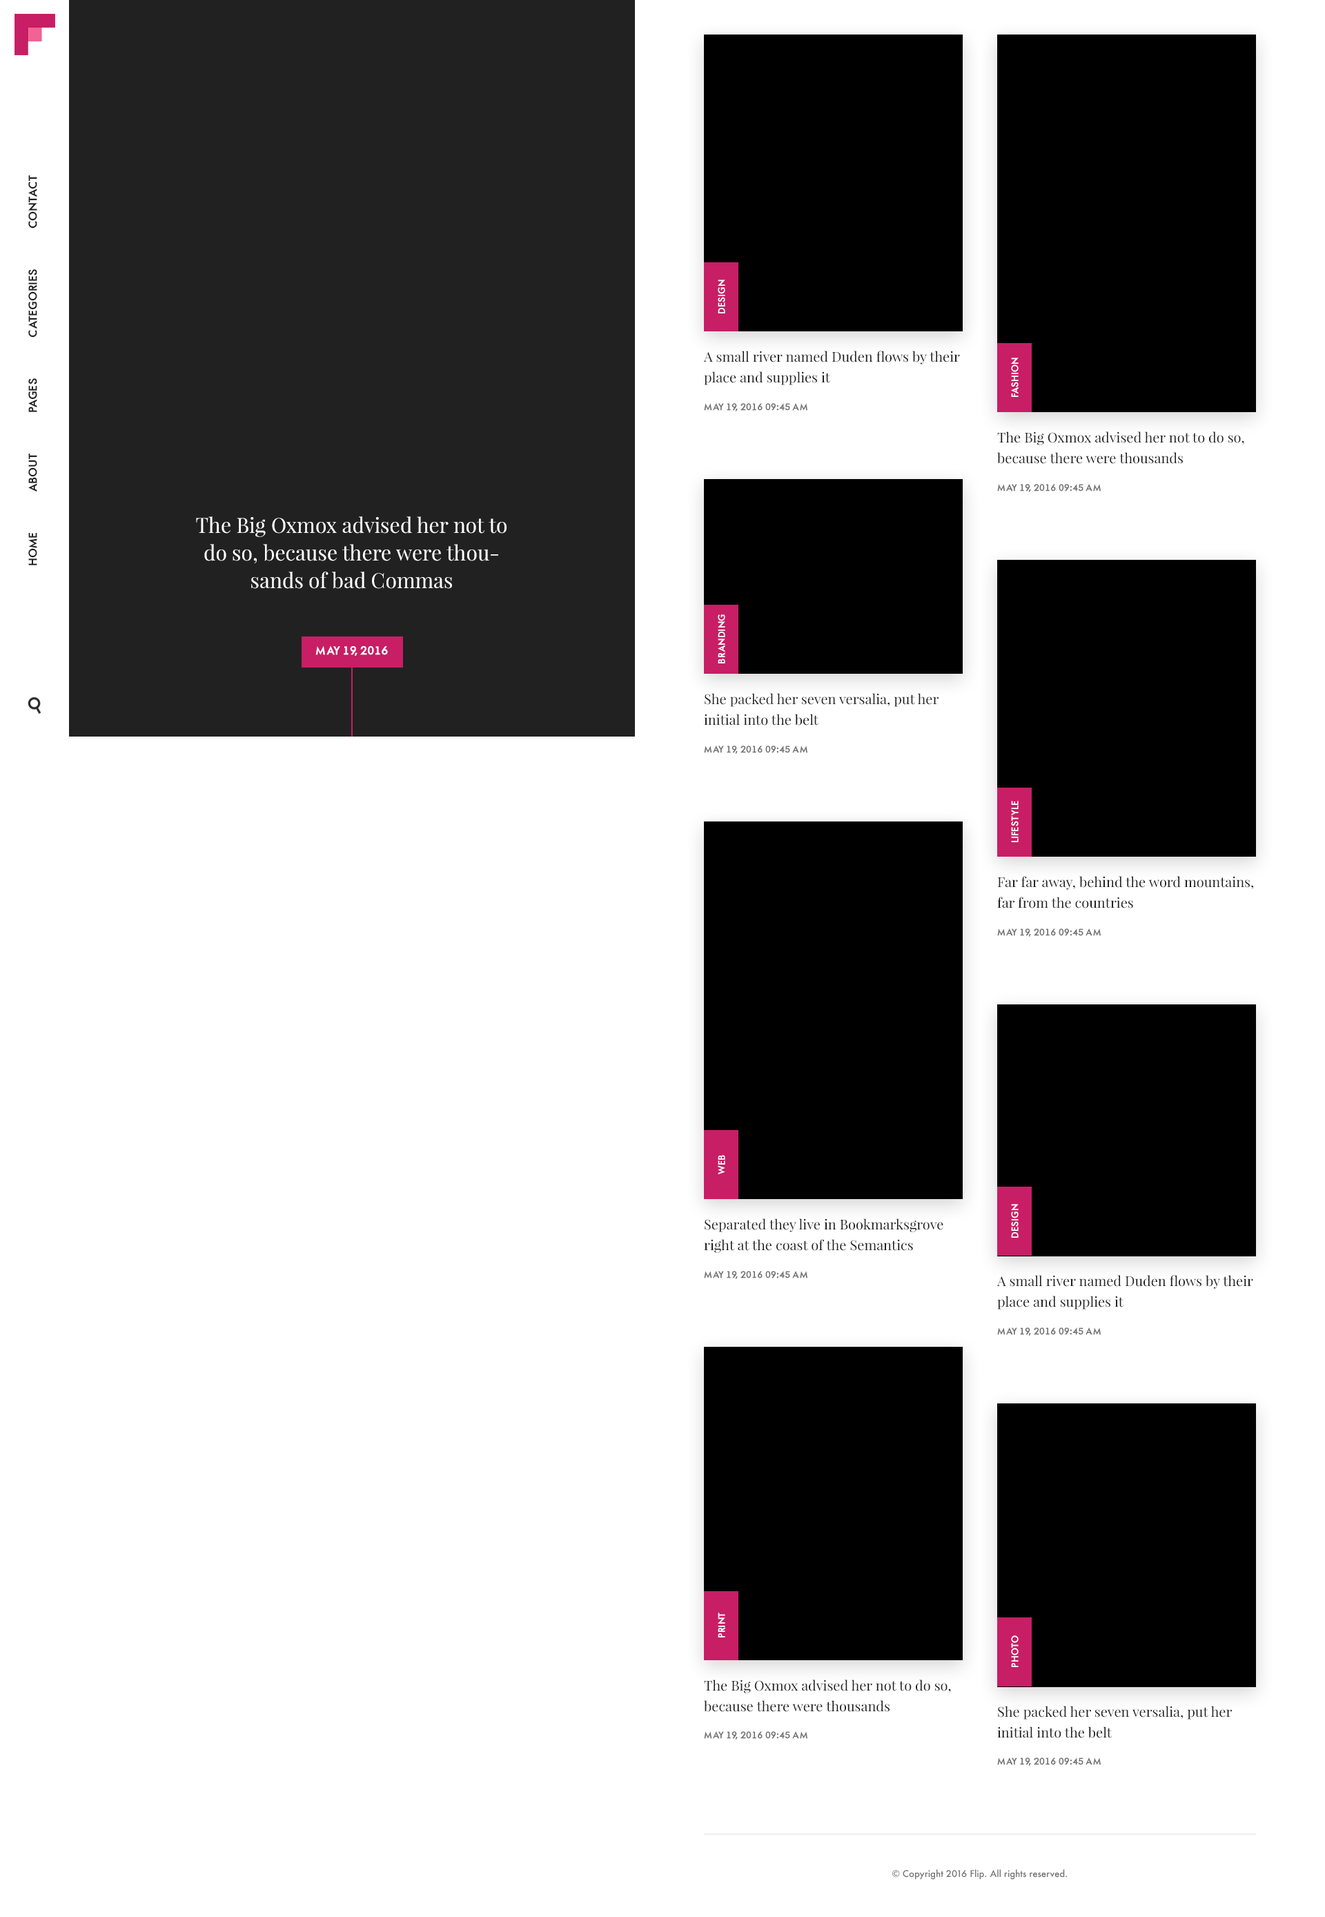
<style>
.page{position:relative;width:1325px;height:1917px;background:#ffffff}
.page>*{position:absolute;margin:0}
.t1{font:11px "AFuturaOrtoBold";color:#212121;text-transform:uppercase}
.t2{font:9px "AFuturaOrtoBold";color:#ffffff;text-transform:uppercase}
.t3{font:13.8px/20.7px "PlayfairDisplay-Regular";color:#212121}
.t4{font:9px "AFuturaOrtoBold";color:#727272;text-transform:uppercase}
.t5{font:20.7px/27.6px "PlayfairDisplay-Regular";color:#ffffff}
.t6{font:11px "AFuturaOrtoBold";color:#ffffff;text-transform:uppercase}
.t7{font:9px "Futura-Medium";color:#727272}
</style>
<div class="page">
<p class="t1" style="left:28px;top:175px;width:9px;height:53px;rotate:-90deg">Contact</p>
<p class="t1" style="left:28px;top:269px;width:9px;height:69px;rotate:-90deg">categories</p>
<p class="t2" style="left:718px;top:280px;width:7px;height:33px;rotate:-90deg">design</p>
<p class="t3" style="left:703px;top:351px;width:257px;height:34px">A small river named Duden flows by their place and supplies it</p>
<p class="t2" style="left:1011px;top:358px;width:8px;height:39px;rotate:-90deg">fashion</p>
<p class="t1" style="left:28px;top:378px;width:9px;height:34px;rotate:-90deg">pages</p>
<p class="t4" style="left:704px;top:403px;width:104px;height:8px">may 19, 2016 09:45 AM</p>
<p class="t3" style="left:997px;top:431px;width:247px;height:33px">The Big Oxmox advised her not to do so, because there were thousands</p>
<p class="t1" style="left:28px;top:453px;width:9px;height:39px;rotate:-90deg">about</p>
<p class="t4" style="left:997px;top:484px;width:104px;height:8px">may 19, 2016 09:45 AM</p>
<p class="t5" style="left:196px;top:516px;width:311px;height:73px;text-align:center">The Big Oxmox advised her not to do so, because there were thousands of bad Commas</p>
<p class="t1" style="left:28px;top:533px;width:9px;height:32px;rotate:-90deg">Home</p>
<p class="t2" style="left:718px;top:614px;width:7px;height:49px;rotate:-90deg">branding</p>
<p class="t6" style="left:315px;top:645px;width:73px;height:11px">may 19, 2016</p>
<p class="t3" style="left:704px;top:693px;width:235px;height:32px">She packed her seven versalia, put her initial into the belt</p>
<p class="t4" style="left:704px;top:745px;width:104px;height:9px">may 19, 2016 09:45 AM</p>
<p class="t2" style="left:1011px;top:801px;width:8px;height:41px;rotate:-90deg">lifestyle</p>
<p class="t3" style="left:997px;top:876px;width:256px;height:32px">Far far away, behind the word mountains, far from the countries</p>
<p class="t4" style="left:997px;top:928px;width:104px;height:9px">may 19, 2016 09:45 AM</p>
<p class="t2" style="left:718px;top:1155px;width:7px;height:19px;rotate:-90deg">web</p>
<p class="t2" style="left:1011px;top:1204px;width:8px;height:34px;rotate:-90deg">design</p>
<p class="t3" style="left:704px;top:1218px;width:240px;height:35px">Separated they live in Bookmarksgrove right at the coast of the Semantics</p>
<p class="t4" style="left:704px;top:1271px;width:104px;height:8px">may 19, 2016 09:45 AM</p>
<p class="t3" style="left:997px;top:1275px;width:256px;height:34px">A small river named Duden flows by their place and supplies it</p>
<p class="t4" style="left:997px;top:1327px;width:104px;height:9px">may 19, 2016 09:45 AM</p>
<p class="t2" style="left:718px;top:1612px;width:7px;height:25px;rotate:-90deg">print</p>
<p class="t2" style="left:1011px;top:1635px;width:8px;height:32px;rotate:-90deg">photo</p>
<p class="t3" style="left:704px;top:1679px;width:247px;height:33px">The Big Oxmox advised her not to do so, because there were thousands</p>
<p class="t3" style="left:997px;top:1706px;width:235px;height:32px">She packed her seven versalia, put her initial into the belt</p>
<p class="t4" style="left:704px;top:1731px;width:104px;height:8px">may 19, 2016 09:45 AM</p>
<p class="t4" style="left:997px;top:1757px;width:104px;height:9px">may 19, 2016 09:45 AM</p>
<p class="t7" style="left:892px;top:1869px;width:175px;height:10px">© Copyright 2016 Flip. All rights reserved.</p>
</div>
